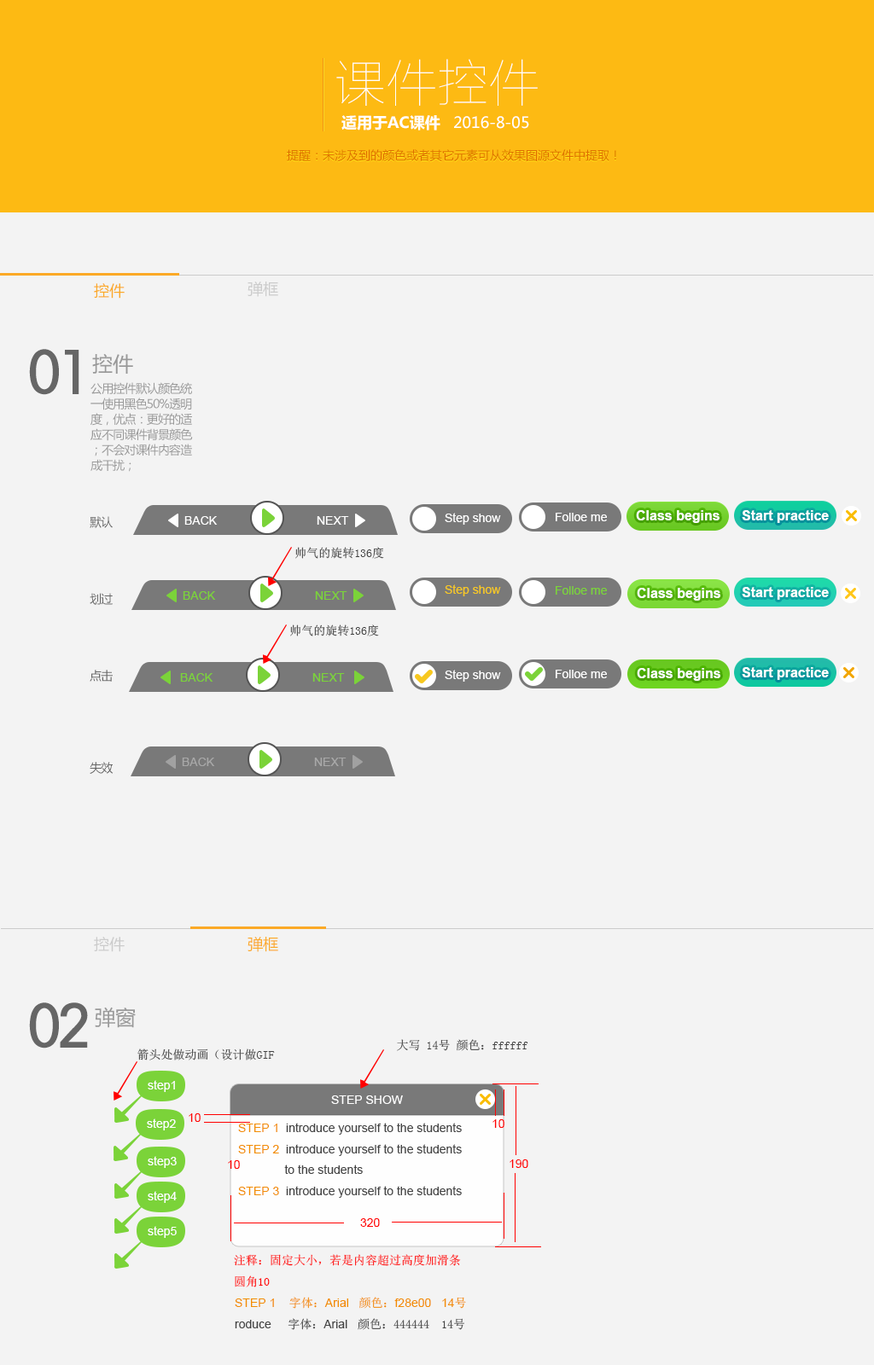
<style>
.page{position:relative;width:874px;height:1365px;background:#f3f3f3}
.page>*{position:absolute;margin:0}
.t1{font:51.2px "FZLTCXHJW--GB1-0";color:#ffffff}
.t2{font:15.4px "MicrosoftYaHei-Bold";color:#ffffff}
.t3{font:15.4px "MicrosoftYaHei";color:#ffffff}
.t4{font:11.9px "MicrosoftYaHei";color:#de6e00}
.t5{font:15.4px "MicrosoftYaHei";color:#cbcbcb}
.t6{font:15.4px "MicrosoftYaHei";color:#fba926}
.t7{font:61.4px "FZMHJW--GB1-0";letter-spacing:-0.06em;color:#666666}
.t8{font:20.5px "MicrosoftYaHei";color:#999999}
.t9{font:11.9px/15.4px "MicrosoftYaHei";letter-spacing:-0.06em;color:#999999}
.t10{font:11.9px/15.4px "MicrosoftYaHei";letter-spacing:-0.06em;color:#666666}
.t11{font:11.9px "ArialMT";color:#ffffff}
.t12{font:13.6px "Arial-BoldMT";color:#ffffff}
.t13{font:11.9px "SimSun";color:#444444}
.t14{font:11.9px "ArialMT";color:#7bd339}
.t15{font:11.9px "ArialMT";color:#f7c820}
.t16{font:11.9px "ArialMT";color:#a8a8a8}
.t17{font:11.9px "ArialMT";color:#ff0000}
.t18{font:11.9px "ArialMT";color:#444444}
.t19{font:11.9px "ArialMT";color:#f28e00}
.t20{font:11.9px "SimSun";color:#ff0000}
.t21{font:11.9px "SimSun";color:#f28e00}
</style>
<div class="page">
<p class="t1" style="left:336px;top:59px;width:201px;height:47px">课件控件</p>
<p class="t2" style="left:341px;top:115px;width:99px;height:16px">适用于AC课件</p>
<p class="t3" style="left:454px;top:116px;width:75px;height:13px">2016-8-05</p>
<p class="t4" style="left:287px;top:149px;width:329px;height:12px">提醒：未涉及到的颜色或者其它元素可从效果图源文件中提取！</p>
<p class="t5" style="left:247px;top:282px;width:31px;height:15px">弹框</p>
<p class="t6" style="left:94px;top:283px;width:31px;height:16px">控件</p>
<p class="t7" style="left:29px;top:349px;width:50px;height:46px">01</p>
<p class="t8" style="left:92px;top:353px;width:41px;height:21px">控件</p>
<p class="t9" style="left:90px;top:382px;width:103px;height:90px">公用控件默认颜色统一使用黑色50%透明度，优点：更好的适应不同课件背景颜色；不会对课件内容造成干扰；</p>
<p class="t10" style="left:90px;top:516px;width:23px;height:258px">默认 <br><br><br><br><br>划过 <br><br><br> <br><br>点击  <br><br><br><br><br>                                            <br>失效</p>
<p class="t11" style="left:184px;top:516px;width:34px;height:9px">BACK</p>
<p class="t11" style="left:317px;top:516px;width:32px;height:9px">NEXT</p>
<p class="t11" style="left:444px;top:513px;width:57px;height:12px">Step show</p>
<p class="t11" style="left:555px;top:513px;width:52px;height:8px">Folloe me</p>
<p class="t12" style="left:636px;top:510px;width:83px;height:13px">Class begins</p>
<p class="t12" style="left:741px;top:510px;width:87px;height:13px">Start practice</p>
<p class="t13" style="left:295px;top:547px;width:89px;height:12px">帅气的旋转136度</p>
<p class="t14" style="left:183px;top:591px;width:33px;height:9px">BACK</p>
<p class="t14" style="left:315px;top:591px;width:32px;height:9px">NEXT</p>
<p class="t15" style="left:444px;top:584px;width:57px;height:12px">Step show</p>
<p class="t14" style="left:555px;top:586px;width:52px;height:9px">Folloe me</p>
<p class="t12" style="left:636px;top:588px;width:84px;height:13px">Class begins</p>
<p class="t12" style="left:741px;top:587px;width:87px;height:13px">Start practice</p>
<p class="t13" style="left:290px;top:624px;width:89px;height:12px">帅气的旋转136度</p>
<p class="t14" style="left:180px;top:673px;width:33px;height:9px">BACK</p>
<p class="t14" style="left:312px;top:673px;width:33px;height:9px">NEXT</p>
<p class="t11" style="left:444px;top:670px;width:57px;height:12px">Step show</p>
<p class="t11" style="left:555px;top:670px;width:52px;height:8px">Folloe me</p>
<p class="t12" style="left:636px;top:668px;width:84px;height:13px">Class begins</p>
<p class="t12" style="left:741px;top:667px;width:87px;height:13px">Start practice</p>
<p class="t16" style="left:182px;top:758px;width:33px;height:8px">BACK</p>
<p class="t16" style="left:314px;top:758px;width:32px;height:8px">NEXT</p>
<p class="t5" style="left:94px;top:937px;width:31px;height:15px">控件</p>
<p class="t6" style="left:247px;top:937px;width:31px;height:15px">弹框</p>
<p class="t7" style="left:29px;top:1002px;width:59px;height:46px">02</p>
<p class="t8" style="left:95px;top:1007px;width:41px;height:21px">弹窗</p>
<p class="t13" style="left:137px;top:1048px;width:138px;height:12px">箭头处做动画（设计做GIF</p>
<p class="t13" style="left:397px;top:1039px;width:131px;height:12px">大写 14号 颜色：ffffff</p>
<p class="t11" style="left:148px;top:1080px;width:27px;height:12px">step1</p>
<p class="t11" style="left:331px;top:1095px;width:72px;height:9px">STEP SHOW</p>
<p class="t11" style="left:147px;top:1118px;width:29px;height:12px">step2</p>
<p class="t17" style="left:189px;top:1113px;width:11px;height:9px">10</p>
<p class="t17" style="left:492px;top:1119px;width:12px;height:9px">10</p>
<p class="t18" style="left:238px;top:1123px;width:224px;height:75px"><span class="t19">STEP 1 </span> introduce yourself to the students<br><span class="t19">STEP 2 </span> introduce yourself to the students<br>              to the students<br><span class="t19">STEP 3 </span> introduce yourself to the students</p>
<p class="t11" style="left:148px;top:1156px;width:29px;height:12px">step3</p>
<p class="t17" style="left:228px;top:1160px;width:12px;height:9px">10</p>
<p class="t17" style="left:509px;top:1159px;width:19px;height:9px">190</p>
<p class="t11" style="left:148px;top:1191px;width:29px;height:12px">step4</p>
<p class="t11" style="left:148px;top:1226px;width:29px;height:12px">step5</p>
<p class="t17" style="left:360px;top:1218px;width:20px;height:9px">320</p>
<p class="t20" style="left:234px;top:1254px;width:227px;height:33px">注释：固定大小，若是内容超过高度加滑条<br>圆角10</p>
<p class="t13" style="left:235px;top:1297px;width:231px;height:33px"><span class="t19">STEP 1    </span><span class="t21">字体：</span><span class="t19">Arial   </span><span class="t21">颜色：</span><span class="t19">f28e00   14</span><span class="t21">号<br></span><span class="t18">roduce     </span>字体：<span class="t18">Arial   </span>颜色：444444  14号</p>
</div>
